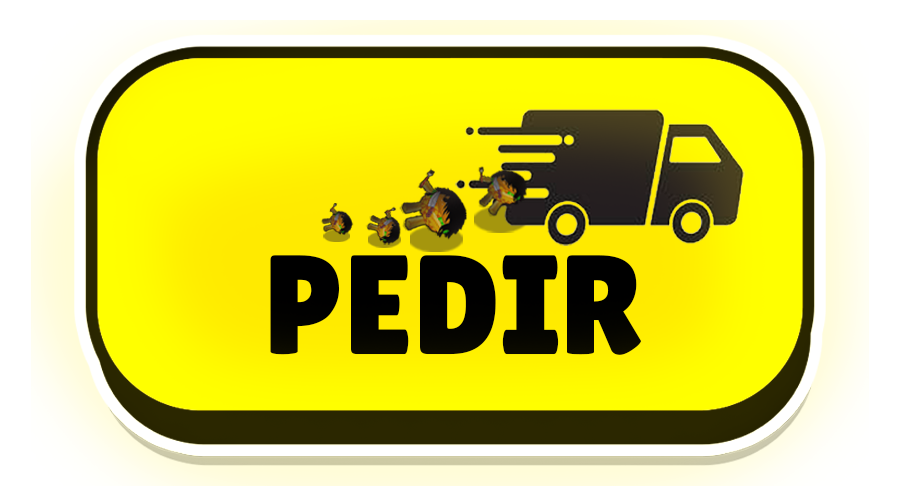
<style>
.page{position:relative;width:900px;height:500px}
.page>*{position:absolute;margin:0}
.t1{font:140.7px "LilitaOne";color:#000000}
</style>
<div class="page">
<p class="t1" style="left:270px;top:255px;width:372px;height:100px">PEDIR</p>
</div>
